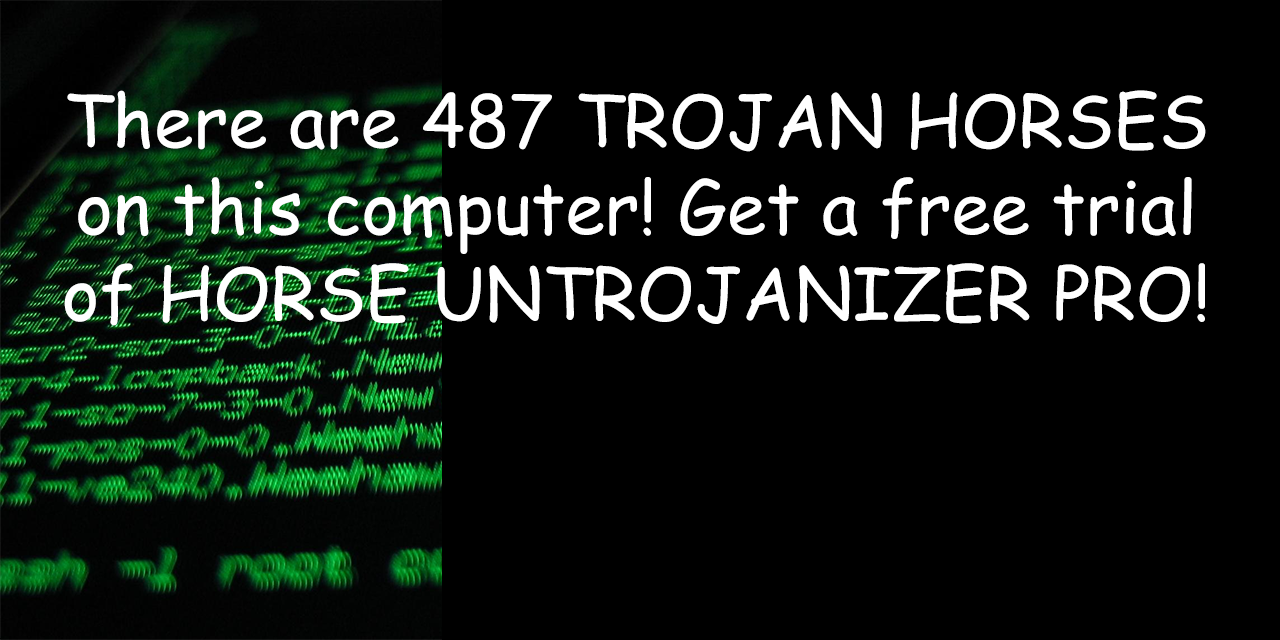
<style>
.page{position:relative;width:1280px;height:640px;background:#000000}
.page>*{position:absolute;margin:0}
.t1{font:72px "ComicSansMS";color:#ffffff}
</style>
<div class="page">
<p class="t1" style="left:64px;top:90px;width:1142px;height:236px;text-align:center">There are 487 TROJAN HORSES<br>on this computer! Get a free trial<br>of HORSE UNTROJANIZER PRO!</p>
</div>
